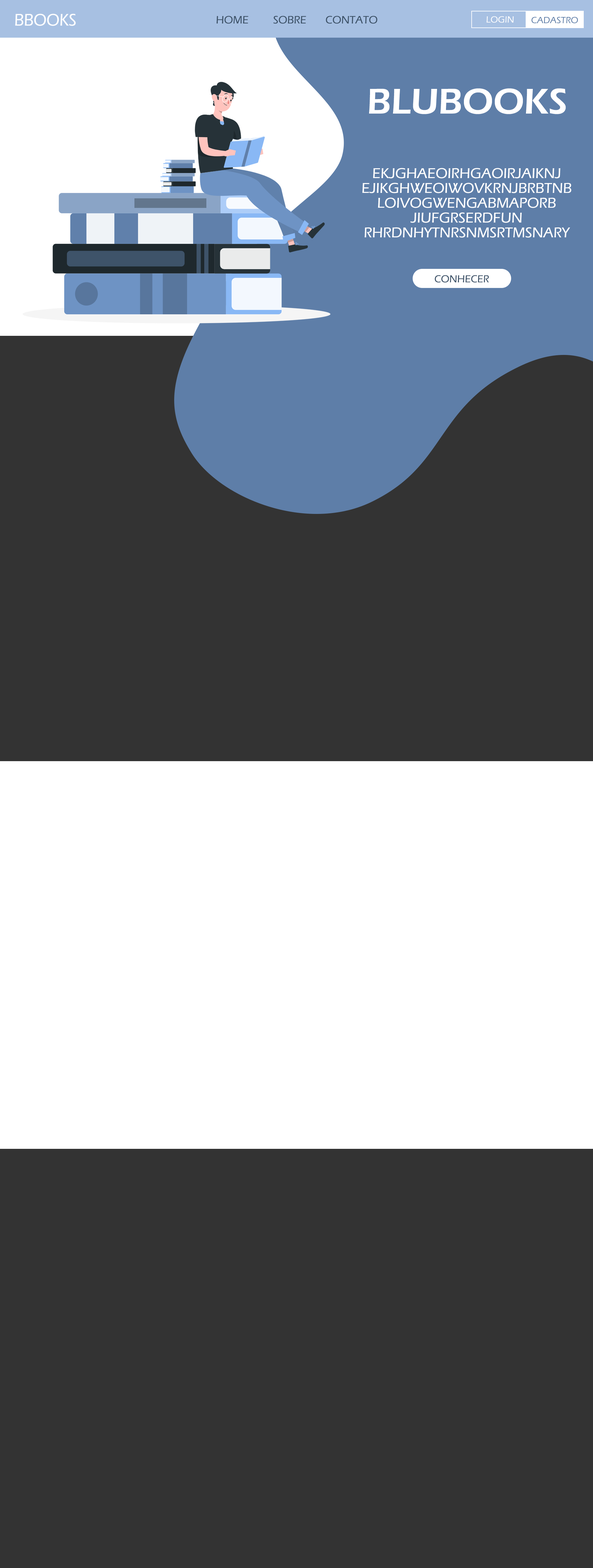
<style>
.page{position:relative;width:593px;height:1568px;background:#333333}
.page>*{position:absolute;margin:0}
.t1{font:17.4px "ErasITC-Medium";letter-spacing:-0.005em;color:#ffffff;text-transform:uppercase;scale:0.93 1}
.t2{font:11.1px "ErasITC-Medium";letter-spacing:-0.005em;color:#3e5369;text-transform:uppercase}
.t3{font:9.3px "ErasITC-Medium";letter-spacing:-0.005em;color:#ffffff;text-transform:uppercase}
.t4{font:9.3px "ErasITC-Medium";letter-spacing:-0.005em;color:#5e7ea8;text-transform:uppercase}
.t5{font:37px "ErasITC-Demi";letter-spacing:-0.005em;color:#ffffff;text-transform:uppercase}
.t6{font:14.8px/14.8px "ErasITC-Medium";letter-spacing:-0.005em;color:#ffffff;text-transform:uppercase}
.t7{font:10.5px "ErasITC-Medium";letter-spacing:-0.005em;color:#3e5369;text-transform:uppercase}
</style>
<div class="page">
<p class="t1" style="left:15px;top:14px;width:61px;height:12px">bbooks</p>
<p class="t2" style="left:216px;top:16px;width:161px;height:8px">HOME         SOBRE       cONTATO</p>
<p class="t3" style="left:486px;top:16px;width:27px;height:7px">LOGIN</p>
<p class="t4" style="left:531px;top:17px;width:47px;height:6px">CADASTRO</p>
<p class="t5" style="left:369px;top:88px;width:196px;height:26px">bLUBOOKS</p>
<p class="t6" style="left:362px;top:168px;width:209px;height:70px;text-align:center">ekjghaeoirhgaoirjaiknj<br>ejikghweoiwovkrnjbrbtnb<br>loivogwengabmaporb<br>jiufgrserdfun<br>rhrdnhytnrsnmsrtmsnary</p>
<p class="t7" style="left:434px;top:275px;width:55px;height:8px">CONHECER</p>
</div>
